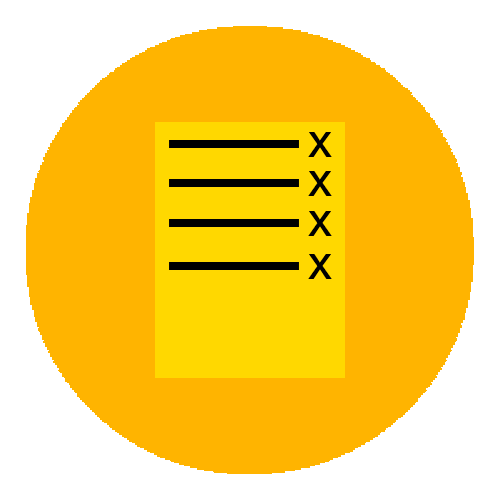
<style>
.page{position:relative;width:500px;height:500px;background:#ffb400}
.page>*{position:absolute;margin:0}
.t1{font:48px "ArialMT";color:#000000}
</style>
<div class="page">
<p class="t1" style="left:308px;top:132px;width:24px;height:25px">x</p>
<p class="t1" style="left:308px;top:171px;width:24px;height:25px">x</p>
<p class="t1" style="left:308px;top:211px;width:24px;height:25px">x</p>
<p class="t1" style="left:308px;top:254px;width:24px;height:25px">x</p>
</div>
